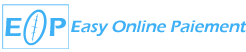
<style>
.page{position:relative;width:246px;height:52px;background:#ffffff}
.page>*{position:absolute;margin:0}
.t1{font:26.9px "ErasITC-Demi";color:#3eb0f6;scale:1.18 1}
.t2{font:17px "ErasITC-Demi";color:#3eb0f6;font-style:italic}
</style>
<div class="page">
<p class="t1" style="left:5px;top:18px;width:17px;height:18px">E</p>
<p class="t1" style="left:49px;top:18px;width:17px;height:18px">P</p>
<p class="t2" style="left:71px;top:20px;width:176px;height:16px">Easy Online Paiement</p>
</div>
